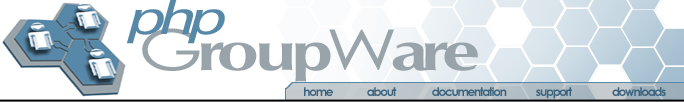
<style>
.page{position:relative;width:684px;height:102px;background:#ffffff}
.page>*{position:absolute;margin:0}
.t1{font:48px "Univers-Oblique";letter-spacing:-0.13em;color:#5788a8;scale:1.32 1}
.t2{font:56.5px "CGOmega-Bold";letter-spacing:-0.1em;color:#99a4aa;scale:1.32 1}
.t3{font:56.5px "CenturyGothic";letter-spacing:-0.1em;color:#99a4aa;scale:1.32 1}
.t4{font:56.5px "CGOmega-Bold";letter-spacing:-0.05em;color:#99a4aa;scale:1.32 1}
.t5{font:12px "CenturyGothic-Bold";letter-spacing:-0.1em;color:#3c637d}
</style>
<div class="page">
<p class="t1" style="left:126px;top:0px;width:99px;height:44px">php</p>
<p class="t2" style="left:142px;top:28px;width:336px;height:54px"><span class="t3">G</span>r<span class="t4">ou</span>p<span class="t3">W</span>are</p>
<p class="t5" style="left:304px;top:87px;width:362px;height:12px">home                about                 documentation              support                   downloads</p>
</div>
